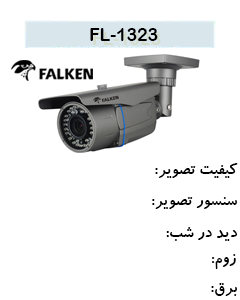
<style>
.page{position:relative;width:240px;height:300px;background:#ffffff}
.page>*{position:absolute;margin:0}
.t1{font:17.6px "ArialRoundedMTBold";color:#000000}
.t2{font:17.6px "BKoodakBold";color:#000000}
</style>
<div class="page">
<p class="t1" style="left:90px;top:28px;width:68px;height:13px">1323-FL</p>
<p class="t2" style="left:155px;top:163px;width:83px;height:15px">کیفیت تصویر:</p>
<p class="t2" style="left:152px;top:197px;width:85px;height:12px">سنسور تصویر:</p>
<p class="t2" style="left:166px;top:227px;width:72px;height:14px">دید در شب:</p>
<p class="t2" style="left:212px;top:254px;width:24px;height:15px">زوم:</p>
<p class="t2" style="left:211px;top:283px;width:26px;height:13px">برق:</p>
</div>
